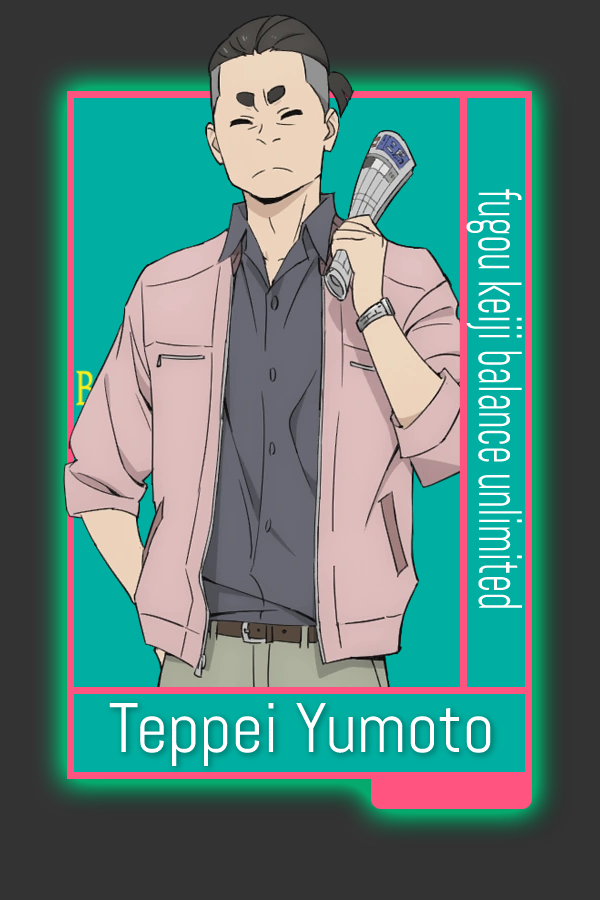
<style>
.page{position:relative;width:600px;height:900px;background:#333333}
.page>*{position:absolute;margin:0}
.t1{font:61.1px "Abel-Regular";color:#ffffff;scale:0.64 1}
.t2{font:70px "Abel-Regular";color:#ffffff}
</style>
<div class="page">
<p class="t1" style="left:466px;top:189px;width:56px;height:419px;rotate:90deg">fugou keiji balance unlimited</p>
<p class="t2" style="left:109px;top:702px;width:382px;height:65px">Teppei Yumoto</p>
</div>
